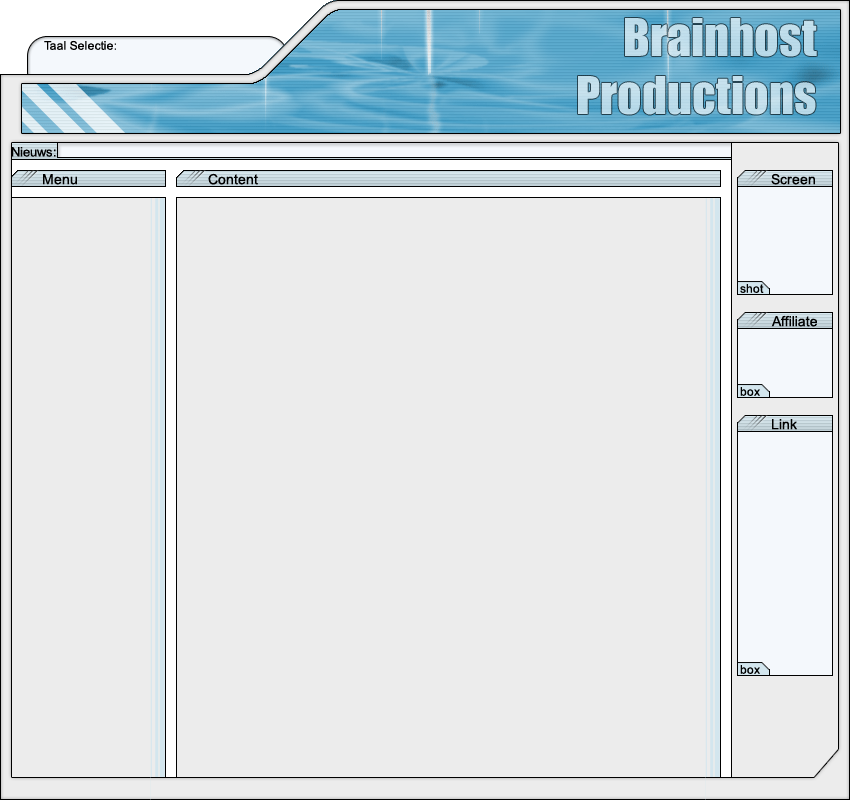
<style>
.page{position:relative;width:850px;height:800px;background:#ececec}
.page>*{position:absolute;margin:0}
.t1{font:12px "ArialMT";color:#000000}
.t2{font:13px "ArialMT";color:#000000}
.t3{font:14px "ArialMT";color:#000000}
</style>
<div class="page">
<p class="t1" style="left:44px;top:40px;width:72px;height:10px">Taal Selectie:</p>
<p class="t2" style="left:11px;top:147px;width:45px;height:10px">Nieuws:</p>
<p class="t3" style="left:43px;top:174px;width:34px;height:11px">Menu</p>
<p class="t3" style="left:208px;top:173px;width:50px;height:12px">Content</p>
<p class="t3" style="left:771px;top:173px;width:44px;height:12px">Screen</p>
<p class="t1" style="left:740px;top:284px;width:24px;height:9px">shot</p>
<p class="t3" style="left:771px;top:315px;width:46px;height:12px">Affiliate</p>
<p class="t1" style="left:740px;top:387px;width:20px;height:9px">box</p>
<p class="t3" style="left:772px;top:419px;width:25px;height:11px">Link</p>
<p class="t1" style="left:740px;top:665px;width:20px;height:9px">box</p>
</div>
